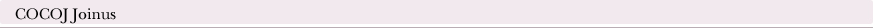
<style>
.page{position:relative;width:873px;height:28px;background:#f2e9ee}
.page>*{position:absolute;margin:0}
.t1{font:16px "NewBaskervilleStd-Roman";color:#020202}
</style>
<div class="page">
<p class="t1" style="left:15px;top:8px;width:101px;height:16px">COCOJ Joinus</p>
</div>
